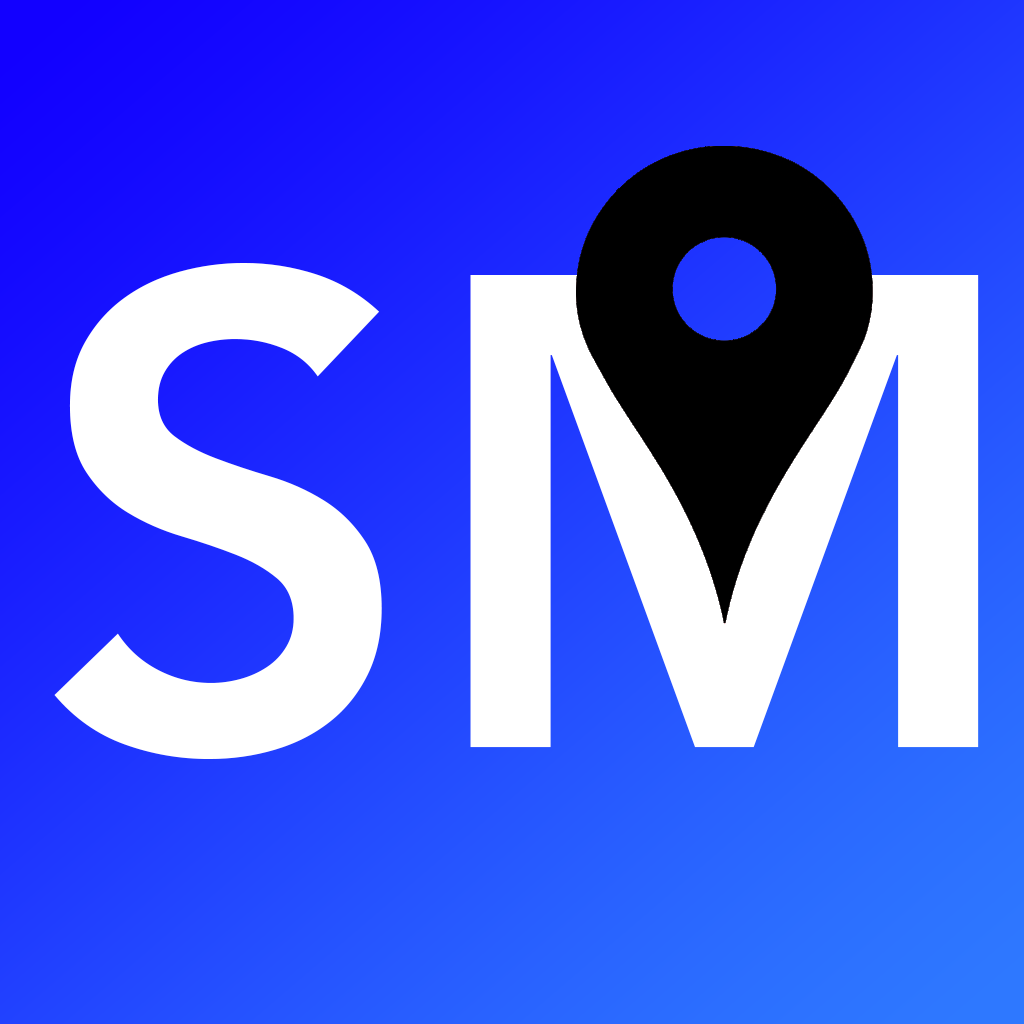
<style>
.page{position:relative;width:1024px;height:1024px}
.page>*{position:absolute;margin:0}
.t1{font:665.7px "Avenir-Heavy";color:#ffffff}
</style>
<div class="page">
<p class="t1" style="left:54px;top:263px;width:925px;height:496px">SM</p>
</div>
